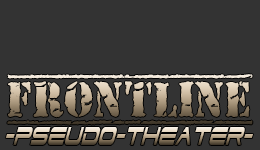
<style>
.page{position:relative;width:260px;height:150px;background:#333333}
.page>*{position:absolute;margin:0}
.t1{font:50.2px "OldStamper";scale:0.87 1}
.t2{font:31.6px "DodgerCondensedItalic";scale:0.63 1}
</style>
<div class="page">
<p class="t1" style="left:7px;top:74px;width:246px;height:51px">FRONTLINE</p>
<p class="t2" style="left:5px;top:127px;width:248px;height:18px">-PSEUDO-THEATER-</p>
</div>
